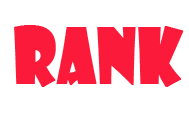
<style>
.page{position:relative;width:189px;height:113px;background:#ffffff}
.page>*{position:absolute;margin:0}
.t1{font:73.6px "ShowcardGothic-Reg";color:#fc1a3a;font-weight:bold;scale:0.83 1}
</style>
<div class="page">
<p class="t1" style="left:14px;top:25px;width:170px;height:62px">RANK</p>
</div>
